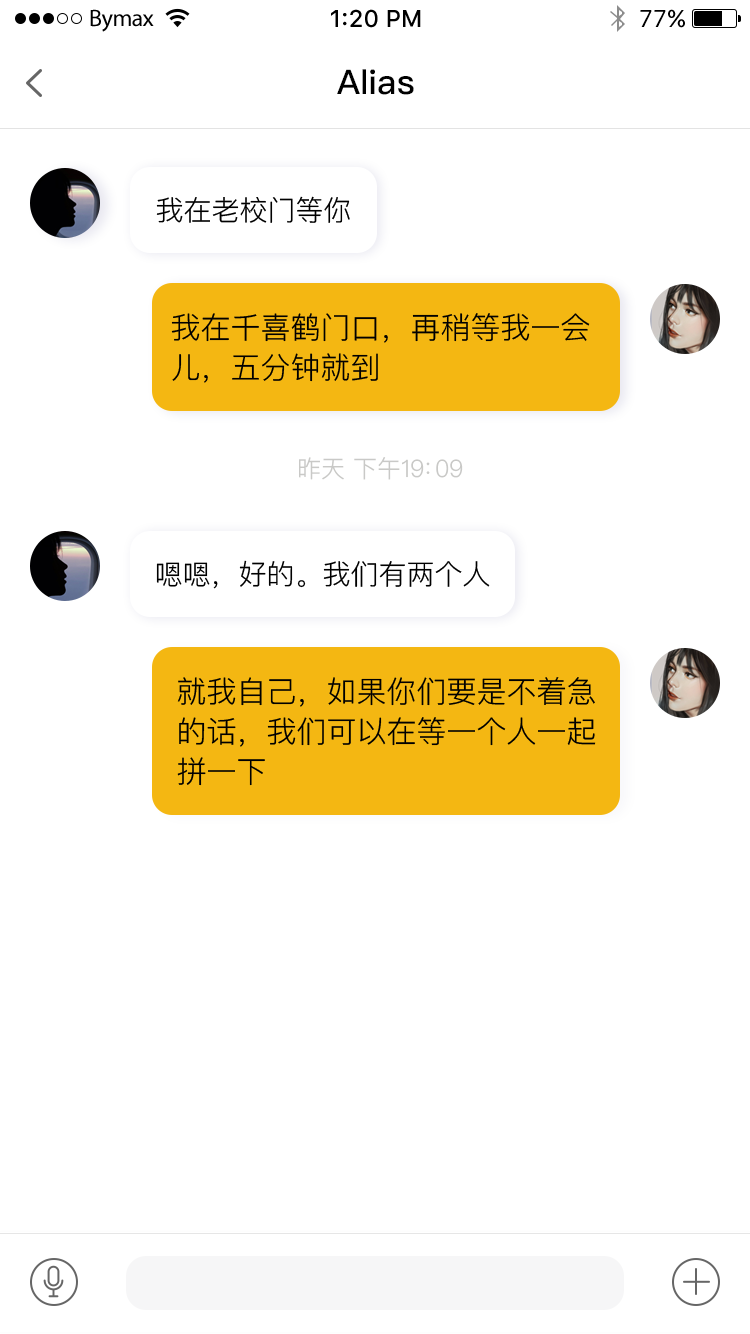
<style>
.page{position:relative;width:750px;height:1334px;background:#ffffff}
.page>*{position:absolute;margin:0}
.t1{font:34px "PingFangSC-Medium";color:#000000}
.t2{font:28px "PingFang-SC-Regular";color:#000000}
.t3{font:30px/40px "PingFang-SC-Regular";color:#010000}
.t4{font:24px "PingFangSC-Light";color:#c9c9c7}
.t5{font:30px/40px "PingFang-SC-Regular";color:#000000}
</style>
<div class="page">
<p class="t1" style="left:337px;top:69px;width:77px;height:26px">Alias</p>
<p class="t2" style="left:156px;top:196px;width:194px;height:27px">我在老校门等你</p>
<p class="t3" style="left:171px;top:313px;width:419px;height:70px">我在千喜鹤门口，再稍等我一会<br>儿，五分钟就到</p>
<p class="t4" style="left:299px;top:457px;width:164px;height:23px">昨天 下午19：09</p>
<p class="t2" style="left:156px;top:560px;width:334px;height:29px">嗯嗯，好的。我们有两个人</p>
<p class="t5" style="left:177px;top:677px;width:419px;height:109px">就我自己，如果你们要是不着急<br>的话，我们可以在等一个人一起<br>拼一下</p>
</div>
